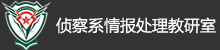
<style>
.page{position:relative;width:220px;height:50px;background:#333333}
.page>*{position:absolute;margin:0}
.t1{font:16px "MicrosoftYaHei";color:#ffffff}
</style>
<div class="page">
<p class="t1" style="left:56px;top:17px;width:160px;height:17px">侦察系情报处理教研室</p>
</div>
